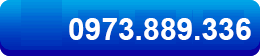
<style>
.page{position:relative;width:260px;height:56px}
.page>*{position:absolute;margin:0}
.t1{font:30px "Arial-BoldMT";color:#ffffff}
</style>
<div class="page">
<p class="t1" style="left:69px;top:18px;width:182px;height:22px">0973.889.336</p>
</div>
